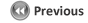
<style>
.page{position:relative;width:88px;height:23px;background:#ffffff}
.page>*{position:absolute;margin:0}
.t1{font:14px "Calibri-Bold";color:#363535}
</style>
<div class="page">
<p class="t1" style="left:34px;top:6px;width:50px;height:10px">Previous</p>
</div>
